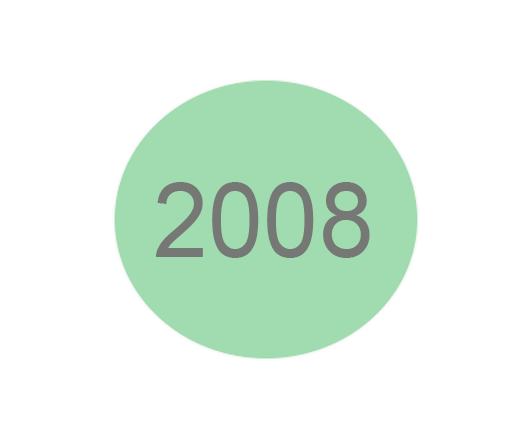
<style>
.page{position:relative;width:519px;height:433px;background:#ffffff}
.page>*{position:absolute;margin:0}
.t1{font:104.8px "ArialMT";color:#767876;scale:0.95 1}
</style>
<div class="page">
<p class="t1" style="left:156px;top:182px;width:214px;height:76px">2008</p>
</div>
